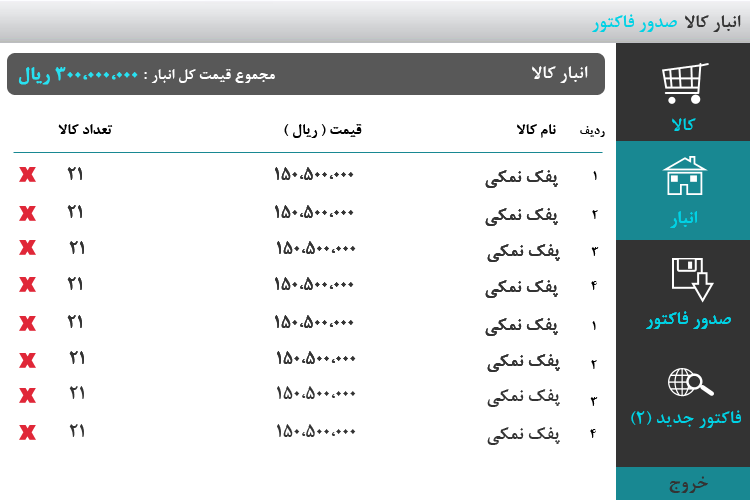
<style>
.page{position:relative;width:750px;height:500px;background:#ffffff}
.page>*{position:absolute;margin:0}
.t1{font:20px "BNazaninBold";color:#00d2e5}
.t2{font:20px "BNazaninBold";color:#333333}
.t3{font:16.7px "BNazaninBold";color:#ffffff}
.t4{font:20px "BNazaninBold";color:#ffffff}
.t5{font:20px "BNazaninBold";color:#28e1f1;font-weight:bold}
.t6{font:16.7px "BNazaninBold";color:#000000}
.t7{font:13.3px "BNazaninBold";color:#000000}
</style>
<div class="page">
<p class="t1" style="left:592px;top:14px;width:85px;height:18px">صدور فاکتور</p>
<p class="t2" style="left:685px;top:15px;width:56px;height:17px">انبار کالا</p>
<p class="t3" style="left:18px;top:67px;width:257px;height:18px">مجموع قیمت کل انبار<span class="t4"> : </span><span class="t5">300،000،000 ریال</span></p>
<p class="t4" style="left:532px;top:66px;width:56px;height:17px">انبار کالا</p>
<p class="t6" style="left:58px;top:124px;width:55px;height:10px">تعداد کالا</p>
<p class="t6" style="left:284px;top:124px;width:78px;height:14px">قیمت ( ریال )</p>
<p class="t6" style="left:517px;top:124px;width:39px;height:14px">نام کالا</p>
<p class="t7" style="left:580px;top:126px;width:25px;height:11px">ردیف</p>
<p class="t1" style="left:672px;top:118px;width:24px;height:13px">کالا</p>
<p class="t2" style="left:67px;top:167px;width:15px;height:13px">21</p>
<p class="t2" style="left:67px;top:167px;width:15px;height:13px">21</p>
<p class="t2" style="left:275px;top:167px;width:79px;height:13px">150،500،000</p>
<p class="t2" style="left:275px;top:167px;width:79px;height:13px">150،500،000</p>
<p class="t2" style="left:485px;top:170px;width:73px;height:18px">پفک نمکی</p>
<p class="t2" style="left:485px;top:170px;width:73px;height:18px">پفک نمکی</p>
<p class="t7" style="left:593px;top:171px;width:4px;height:9px">1</p>
<p class="t2" style="left:67px;top:205px;width:15px;height:13px">21</p>
<p class="t2" style="left:67px;top:205px;width:15px;height:13px">21</p>
<p class="t2" style="left:275px;top:205px;width:79px;height:13px">150،500،000</p>
<p class="t2" style="left:275px;top:205px;width:79px;height:13px">150،500،000</p>
<p class="t2" style="left:485px;top:208px;width:73px;height:18px">پفک نمکی</p>
<p class="t2" style="left:485px;top:208px;width:73px;height:18px">پفک نمکی</p>
<p class="t7" style="left:592px;top:210px;width:6px;height:9px">2</p>
<p class="t1" style="left:670px;top:211px;width:27px;height:17px">انبار</p>
<p class="t1" style="left:670px;top:211px;width:27px;height:17px">انبار</p>
<p class="t2" style="left:69px;top:241px;width:15px;height:13px">21</p>
<p class="t2" style="left:69px;top:241px;width:15px;height:13px">21</p>
<p class="t2" style="left:277px;top:241px;width:79px;height:13px">150،500،000</p>
<p class="t2" style="left:277px;top:241px;width:79px;height:13px">150،500،000</p>
<p class="t2" style="left:487px;top:244px;width:73px;height:18px">پفک نمکی</p>
<p class="t2" style="left:487px;top:244px;width:73px;height:18px">پفک نمکی</p>
<p class="t7" style="left:591px;top:247px;width:8px;height:9px">3</p>
<p class="t2" style="left:67px;top:277px;width:15px;height:13px">21</p>
<p class="t2" style="left:67px;top:277px;width:15px;height:13px">21</p>
<p class="t2" style="left:275px;top:277px;width:79px;height:13px">150،500،000</p>
<p class="t2" style="left:275px;top:277px;width:79px;height:13px">150،500،000</p>
<p class="t2" style="left:485px;top:280px;width:73px;height:18px">پفک نمکی</p>
<p class="t2" style="left:485px;top:280px;width:73px;height:18px">پفک نمکی</p>
<p class="t7" style="left:591px;top:281px;width:6px;height:9px">4</p>
<p class="t2" style="left:67px;top:315px;width:15px;height:13px">21</p>
<p class="t2" style="left:67px;top:315px;width:15px;height:13px">21</p>
<p class="t2" style="left:275px;top:315px;width:79px;height:13px">150،500،000</p>
<p class="t2" style="left:275px;top:315px;width:79px;height:13px">150،500،000</p>
<p class="t2" style="left:485px;top:318px;width:73px;height:18px">پفک نمکی</p>
<p class="t2" style="left:485px;top:318px;width:73px;height:18px">پفک نمکی</p>
<p class="t1" style="left:646px;top:311px;width:85px;height:18px">صدور فاکتور</p>
<p class="t1" style="left:646px;top:311px;width:85px;height:18px">صدور فاکتور</p>
<p class="t7" style="left:592px;top:321px;width:4px;height:9px">1</p>
<p class="t2" style="left:69px;top:351px;width:15px;height:13px">21</p>
<p class="t2" style="left:69px;top:351px;width:15px;height:13px">21</p>
<p class="t2" style="left:277px;top:351px;width:79px;height:13px">150،500،000</p>
<p class="t2" style="left:277px;top:351px;width:79px;height:13px">150،500،000</p>
<p class="t2" style="left:487px;top:354px;width:73px;height:18px">پفک نمکی</p>
<p class="t2" style="left:487px;top:354px;width:73px;height:18px">پفک نمکی</p>
<p class="t7" style="left:591px;top:360px;width:6px;height:9px">2</p>
<p class="t2" style="left:69px;top:386px;width:15px;height:13px">21</p>
<p class="t2" style="left:277px;top:386px;width:79px;height:13px">150،500،000</p>
<p class="t2" style="left:487px;top:389px;width:73px;height:18px">پفک نمکی</p>
<p class="t7" style="left:590px;top:397px;width:8px;height:9px">3</p>
<p class="t1" style="left:631px;top:410px;width:110px;height:18px">فاکتور جدید (2)</p>
<p class="t2" style="left:69px;top:424px;width:15px;height:13px">21</p>
<p class="t2" style="left:277px;top:424px;width:79px;height:13px">150،500،000</p>
<p class="t2" style="left:487px;top:427px;width:73px;height:18px">پفک نمکی</p>
<p class="t7" style="left:590px;top:429px;width:6px;height:9px">4</p>
<p class="t2" style="left:669px;top:476px;width:39px;height:17px">خروج</p>
</div>
